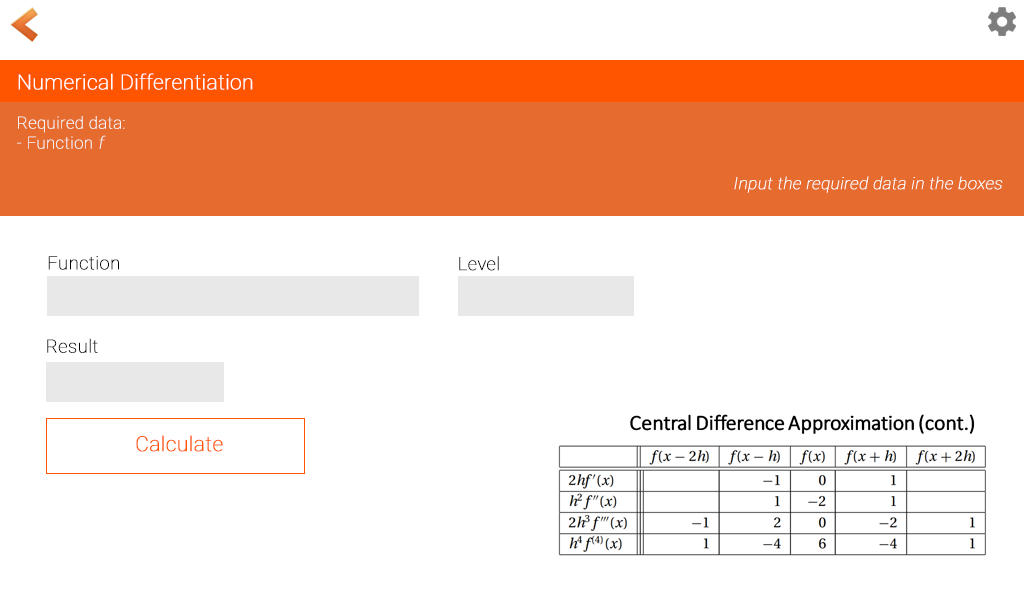
<style>
.page{position:relative;width:1024px;height:600px;background:#ffffff}
.page>*{position:absolute;margin:0}
.t1{font:20.8px "Roboto-Thin";color:#ffffff;font-weight:bold}
.t2{font:16.7px "Roboto-Thin";color:#f3f3f3;font-weight:bold}
.t3{font:16.7px "Roboto-Thin";color:#f3f3f3;font-weight:bold;font-style:italic}
.t4{font:16.7px "Roboto-Thin";color:#ffffff;font-weight:bold;font-style:italic}
.t5{font:18.3px "Roboto-Thin";color:#000000;font-weight:bold}
.t6{font:20.8px "Roboto-Thin";color:#ff5500;font-weight:bold}
</style>
<div class="page">
<p class="t1" style="left:18px;top:73px;width:235px;height:17px">Numerical Differentiation</p>
<p class="t2" style="left:17px;top:116px;width:108px;height:33px">Required data:<br>- Function <span class="t3">f</span></p>
<p class="t4" style="left:734px;top:176px;width:269px;height:17px">Input the required data in the boxes</p>
<p class="t5" style="left:48px;top:256px;width:71px;height:14px">Function</p>
<p class="t5" style="left:459px;top:256px;width:40px;height:15px">Level</p>
<p class="t5" style="left:47px;top:338px;width:51px;height:15px">Result</p>
<p class="t6" style="left:136px;top:435px;width:87px;height:17px">Calculate</p>
</div>
